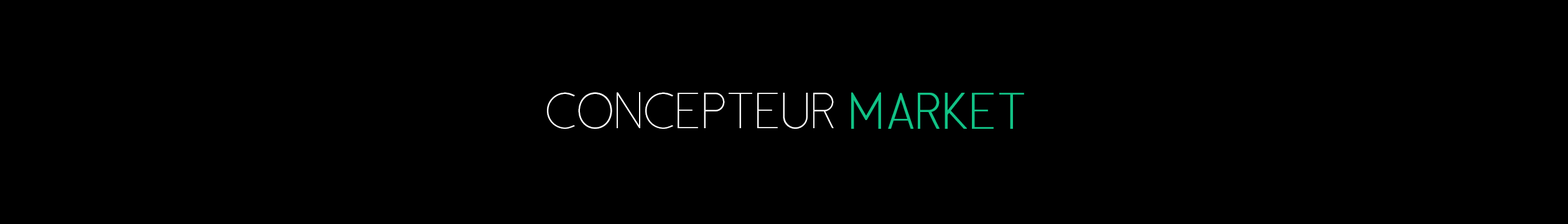
<style>
.page{position:relative;width:1568px;height:224px;background:#000000}
.page>*{position:absolute;margin:0}
.t1{font:44.8px "Satellite";color:#ffffff}
.t2{font:44.8px "Satellite";color:#12c286;font-weight:bold}
</style>
<div class="page">
<p class="t1" style="left:547px;top:92px;width:477px;height:37px">CONCEPTEUR <span class="t2">MARKET</span></p>
</div>
